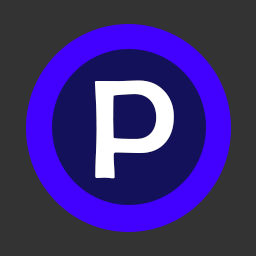
<style>
.page{position:relative;width:256px;height:256px;background:#333333}
.page>*{position:absolute;margin:0}
.t1{font:141.7px "BerlinSansFB-Reg";color:#ffffff}
</style>
<div class="page">
<p class="t1" style="left:94px;top:80px;width:80px;height:99px">P</p>
</div>
